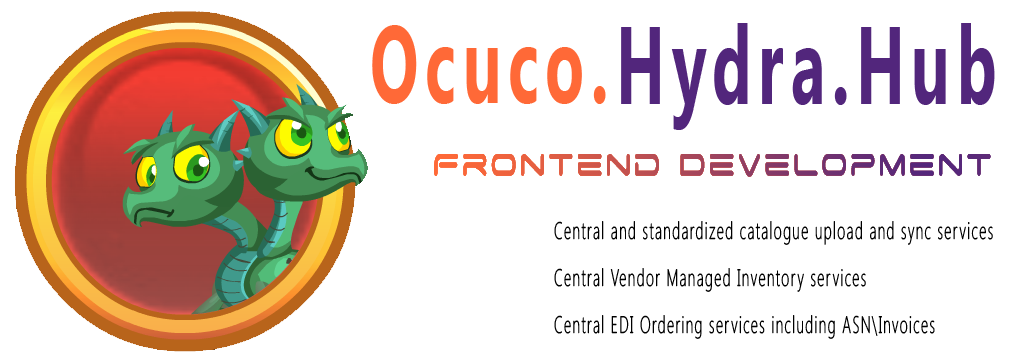
<style>
.page{position:relative;width:1031px;height:364px;background:#ffffff}
.page>*{position:absolute;margin:0}
.t1{font:110.4px "SegoeUI-Bold";letter-spacing:0.1em;color:#ff6937;scale:0.58 1}
.t2{font:110.4px "SegoeUI-Bold";letter-spacing:0.1em;color:#52267c;scale:0.58 1}
.t3{font:24px/46.7px "SegoeUI-Light";letter-spacing:0.1em;color:#000000;scale:0.58 1}
</style>
<div class="page">
<p class="t1" style="left:372px;top:25px;width:234px;height:79px">Ocuco.</p>
<p class="t2" style="left:621px;top:23px;width:374px;height:107px">Hydra.Hub</p>
<p class="t3" style="left:554px;top:221px;width:439px;height:118px">Central and standardized catalogue upload and sync services<br>Central Vendor Managed Inventory services<br>Central EDI Ordering services including ASN\Invoices</p>
</div>
